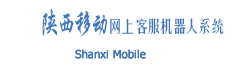
<style>
.page{position:relative;width:232px;height:66px;background:#ffffff}
.page>*{position:absolute;margin:0}
.t1{font:16px "FZYTK--GBK1-0";letter-spacing:-0.2em;color:#4477b8}
.t2{font:28.8px "STXingkai";letter-spacing:-0.1em;color:#4477b8;scale:0.67 1}
.t3{font:11px "Tahoma";color:#4477b8;font-weight:bold}
</style>
<div class="page">
<p class="t1" style="left:42px;top:9px;width:182px;height:28px"><span class="t2">陕西移动</span>网上客服机器人系统</p>
<p class="t3" style="left:75px;top:49px;width:71px;height:10px">Shanxi Mobile</p>
</div>
